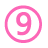
<style>
.page{position:relative;width:48px;height:48px;background:#ffffff}
.page>*{position:absolute;margin:0}
.t1{font:40px "MicrosoftYaHei";color:#fc67b7;font-weight:bold}
</style>
<div class="page">
<p class="t1" style="left:4px;top:5px;width:38px;height:38px">⑨</p>
</div>
